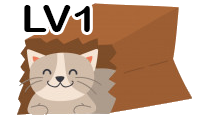
<style>
.page{position:relative;width:206px;height:117px;background:#ffffff}
.page>*{position:absolute;margin:0}
.t1{font:37.2px "ArialRoundedMTBold";color:#000000;scale:1.15 1}
</style>
<div class="page">
<p class="t1" style="left:24px;top:5px;width:66px;height:27px">LV1</p>
</div>
